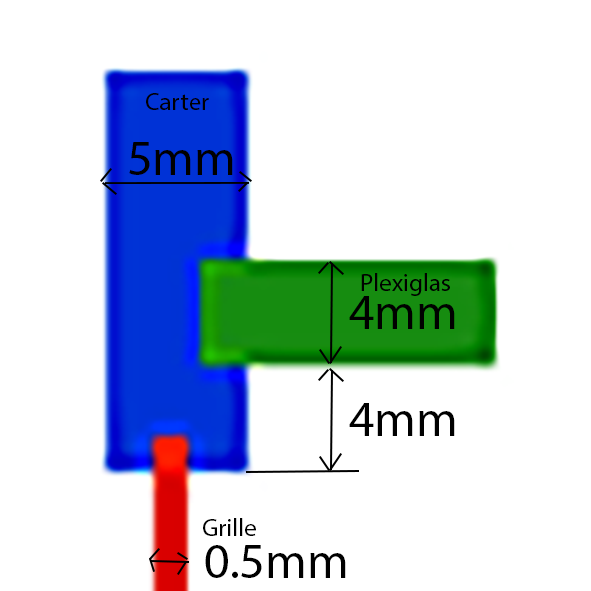
<style>
.page{position:relative;width:591px;height:591px;background:#ffffff}
.page>*{position:absolute;margin:0}
.t1{font:25px "MyriadPro-Regular";color:#000000}
.t2{font:50px "MyriadPro-Regular";color:#000000}
</style>
<div class="page">
<p class="t1" style="left:146px;top:93px;width:63px;height:17px">Carter</p>
<p class="t2" style="left:129px;top:142px;width:104px;height:33px">5mm</p>
<p class="t1" style="left:361px;top:273px;width:89px;height:23px">Plexiglas</p>
<p class="t2" style="left:349px;top:296px;width:106px;height:33px">4mm</p>
<p class="t2" style="left:349px;top:403px;width:106px;height:33px">4mm</p>
<p class="t1" style="left:203px;top:518px;width:53px;height:18px">Grille</p>
<p class="t2" style="left:205px;top:545px;width:141px;height:33px">0.5mm</p>
</div>
